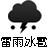
<style>
.page{position:relative;width:50px;height:48px;background:#ffffff}
.page>*{position:absolute;margin:0}
.t1{font:12px "OPPOSans-R";color:#000000}
</style>
<div class="page">
<p class="t1" style="left:1px;top:36px;width:46px;height:11px">雷雨冰雹</p>
</div>
